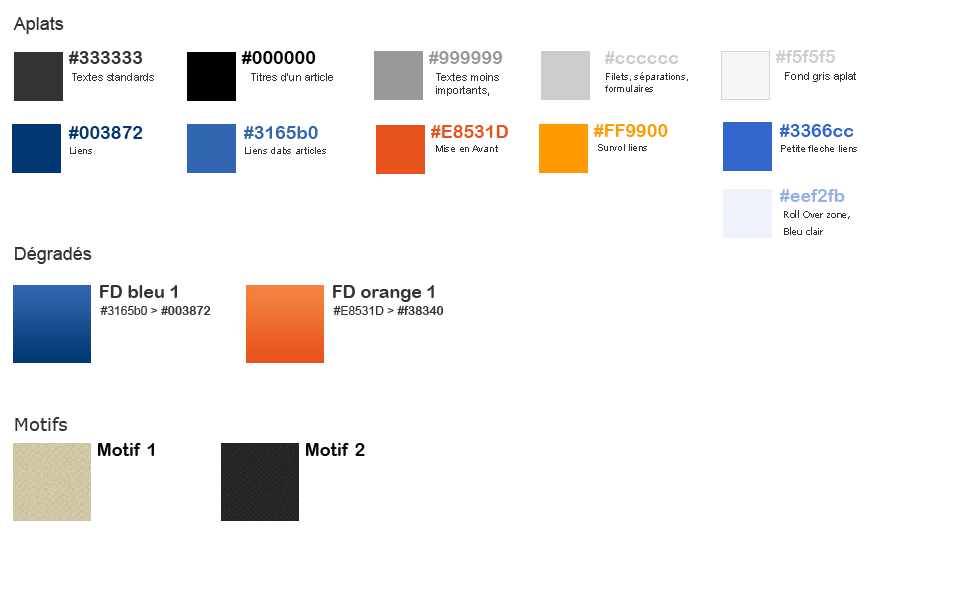
<style>
.page{position:relative;width:980px;height:600px;background:#ffffff}
.page>*{position:absolute;margin:0}
.t1{font:18px "ArialMT";color:#333333}
.t2{font:18px "ArialRoundedMTBold";color:#333333}
.t3{font:18px "ArialRoundedMTBold";color:#000000}
.t4{font:18px "ArialRoundedMTBold";color:#999999}
.t5{font:18px "ArialRoundedMTBold";color:#cccccc}
.t6{font:18px "ArialRoundedMTBold";color:#cfcece}
.t7{font:11px "ArialMT";color:#333333}
.t8{font:10px "ArialMT";color:#333333}
.t9{font:18px "ArialRoundedMTBold";color:#003872}
.t10{font:18px "ArialRoundedMTBold";color:#3165b0}
.t11{font:18px "ArialRoundedMTBold";color:#e8531d}
.t12{font:18px "ArialRoundedMTBold";color:#ff9900}
.t13{font:18px "ArialRoundedMTBold";color:#3366cc}
.t14{font:18px "ArialRoundedMTBold";color:#96afe8}
.t15{font:10px "Tahoma";color:#333333}
.t16{font:12px "ArialMT";color:#333333}
.t17{font:12px "ArialRoundedMTBold";color:#333333}
.t18{font:18px "Verdana";color:#333333}
.t19{font:18px "ArialRoundedMTBold";color:#060606}
</style>
<div class="page">
<p class="t1" style="left:13px;top:17px;width:51px;height:17px">Aplats</p>
<p class="t2" style="left:68px;top:51px;width:75px;height:13px">#333333</p>
<p class="t3" style="left:241px;top:51px;width:75px;height:13px">#000000</p>
<p class="t4" style="left:428px;top:51px;width:74px;height:13px">#999999</p>
<p class="t5" style="left:604px;top:51px;width:75px;height:13px">#cccccc</p>
<p class="t6" style="left:775px;top:50px;width:60px;height:13px">#f5f5f5</p>
<p class="t7" style="left:72px;top:73px;width:82px;height:8px">Textes standards</p>
<p class="t7" style="left:251px;top:73px;width:82px;height:8px">Titres d’un article</p>
<p class="t7" style="left:436px;top:73px;width:63px;height:23px">Textes moins importants, desactivé</p>
<p class="t8" style="left:605px;top:72px;width:83px;height:20px">Filets, séparations, formulaires</p>
<p class="t7" style="left:785px;top:72px;width:71px;height:10px">Fond gris aplat</p>
<p class="t9" style="left:68px;top:126px;width:75px;height:13px">#003872</p>
<p class="t10" style="left:243px;top:126px;width:75px;height:13px">#3165b0</p>
<p class="t11" style="left:430px;top:125px;width:78px;height:13px">#E8531D</p>
<p class="t12" style="left:593px;top:124px;width:75px;height:13px">#FF9900</p>
<p class="t13" style="left:779px;top:124px;width:75px;height:13px">#3366cc</p>
<p class="t8" style="left:70px;top:147px;width:22px;height:7px">Liens</p>
<p class="t8" style="left:245px;top:147px;width:81px;height:7px">Liens dabs articles</p>
<p class="t8" style="left:436px;top:145px;width:62px;height:7px">Mise en Avant</p>
<p class="t8" style="left:598px;top:144px;width:49px;height:7px">Survol liens</p>
<p class="t8" style="left:781px;top:145px;width:76px;height:7px">Petite fleche liens</p>
<p class="t14" style="left:779px;top:189px;width:66px;height:13px">#eef2fb</p>
<p class="t15" style="left:784px;top:210px;width:66px;height:25px">Roll Over zone, <br>Bleu clair</p>
<p class="t1" style="left:15px;top:247px;width:77px;height:17px">Dégradés</p>
<p class="t2" style="left:100px;top:285px;width:77px;height:13px">FD bleu 1</p>
<p class="t2" style="left:333px;top:285px;width:101px;height:17px">FD orange 1</p>
<p class="t16" style="left:100px;top:306px;width:111px;height:9px">#3165b0 &gt; <span class="t17">#003872</span></p>
<p class="t16" style="left:333px;top:306px;width:111px;height:9px">#E8531D &gt; <span class="t17">#f38340</span></p>
<p class="t18" style="left:15px;top:417px;width:52px;height:14px">Motifs</p>
<p class="t19" style="left:98px;top:443px;width:56px;height:13px">Motif 1</p>
<p class="t19" style="left:306px;top:443px;width:59px;height:13px">Motif 2</p>
</div>
